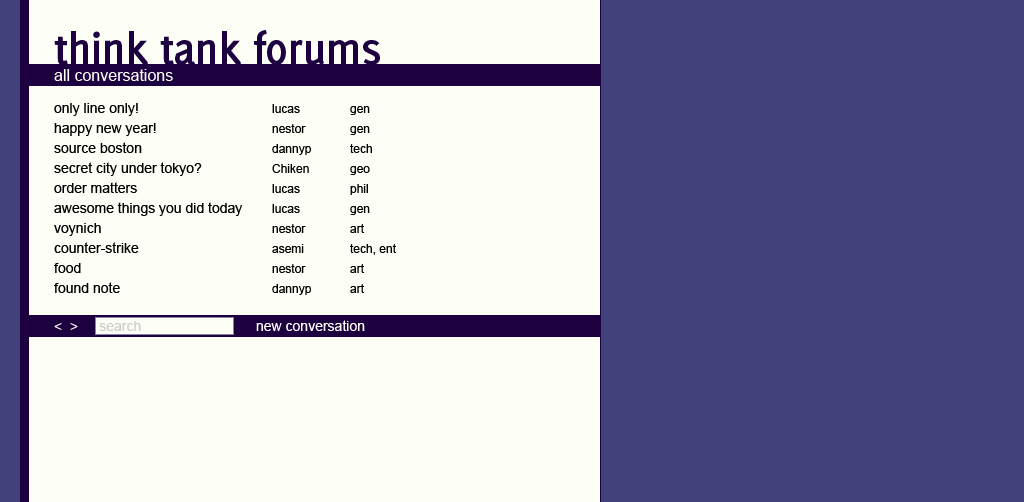
<style>
.page{position:relative;width:1024px;height:502px;background:#fdfff6}
.page>*{position:absolute;margin:0}
.t1{font:48px "Delicious-Bold";letter-spacing:-0.025em;color:#1d0040}
.t2{font:16px "ArialMT";color:#fdfff6}
.t3{font:14px/20px "ArialMT";color:#000000}
.t4{font:12px/20px "ArialMT";color:#000000}
.t5{font:14px "ArialMT";color:#fdfff6}
.t6{font:14px "ArialMT";color:#cccccc}
</style>
<div class="page">
<p class="t1" style="left:54px;top:30px;width:326px;height:35px">think tank forums</p>
<p class="t2" style="left:54px;top:69px;width:119px;height:12px">all conversations</p>
<p class="t3" style="left:54px;top:103px;width:189px;height:190px">only line only!<br>happy new year!<br>source boston<br>secret city under tokyo?<br>order matters<br>awesome things you did today<br>voynich<br>counter-strike<br>food<br>found note</p>
<p class="t4" style="left:272px;top:104px;width:39px;height:191px">lucas<br>nestor<br>dannyp<br>Chiken<br>lucas<br>lucas<br>nestor<br>asemi<br>nestor<br>dannyp</p>
<p class="t4" style="left:350px;top:106px;width:46px;height:187px">gen<br>gen<br>tech<br>geo<br>phil<br>gen<br>art<br>tech, ent<br>art<br>art</p>
<p class="t5" style="left:54px;top:323px;width:24px;height:7px">&lt;  &gt;</p>
<p class="t6" style="left:99px;top:321px;width:42px;height:10px">search</p>
<p class="t5" style="left:256px;top:320px;width:109px;height:11px">new conversation</p>
</div>
